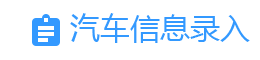
<style>
.page{position:relative;width:260px;height:60px;background:#ffffff}
.page>*{position:absolute;margin:0}
.t1{font:30px "MicrosoftYaHei";color:#3399ff}
</style>
<div class="page">
<p class="t1" style="left:70px;top:13px;width:180px;height:30px">汽车信息录入</p>
</div>
